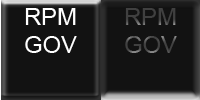
<style>
.page{position:relative;width:200px;height:100px;background:#121212}
.page>*{position:absolute;margin:0}
.t1{font:24px "ArialMT";color:#ffffff}
.t2{font:24px "ArialMT";color:#404040}
</style>
<div class="page">
<p class="t1" style="left:25px;top:8px;width:52px;height:45px;text-align:center">RPM<br>GOV</p>
<p class="t2" style="left:125px;top:8px;width:52px;height:45px;text-align:center">RPM<br>GOV</p>
</div>
